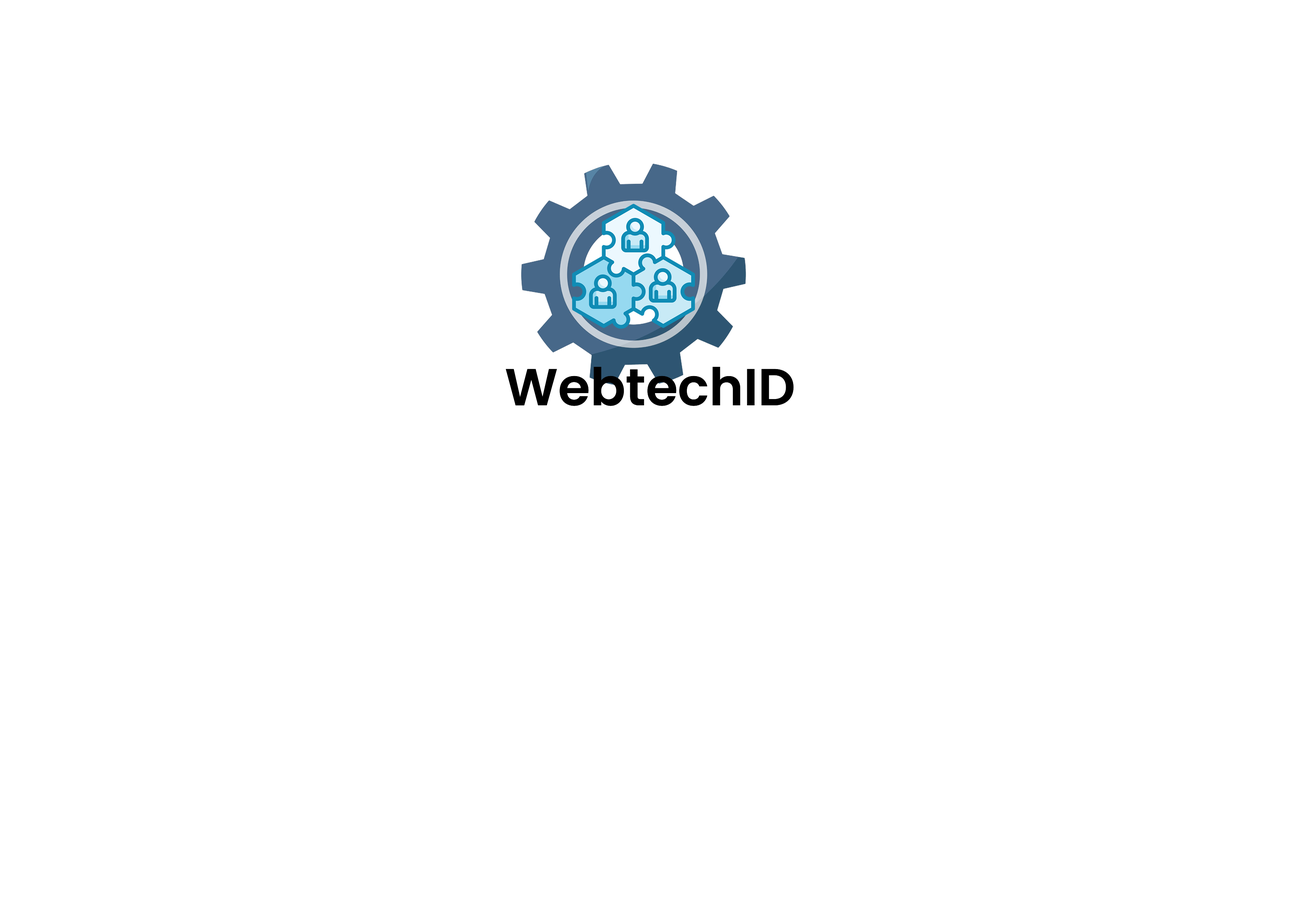
<style>
.page{position:relative;width:1299px;height:918px;background:#ffffff}
.page>*{position:absolute;margin:0}
.t1{font:52px "Poppins-SemiBold";color:#000000}
</style>
<div class="page">
<p class="t1" style="left:506px;top:367px;width:287px;height:39px">WebtechID</p>
</div>
